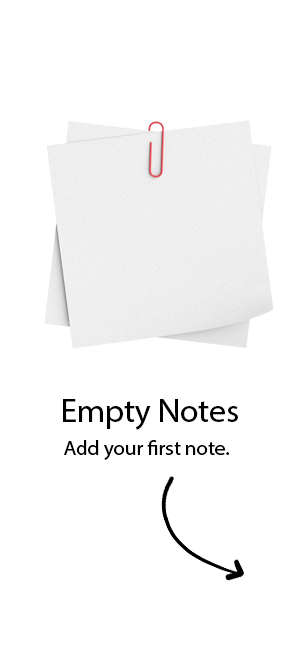
<style>
.page{position:relative;width:300px;height:647px;background:#ffffff}
.page>*{position:absolute;margin:0}
.t1{font:33.3px "MyriadHebrew-Regular";color:#000000}
.t2{font:20.8px "MyriadHebrew-Regular";color:#000000}
</style>
<div class="page">
<p class="t1" style="left:63px;top:399px;width:175px;height:31px">Empty Notes</p>
<p class="t2" style="left:64px;top:440px;width:165px;height:20px">.Add your first note</p>
</div>
